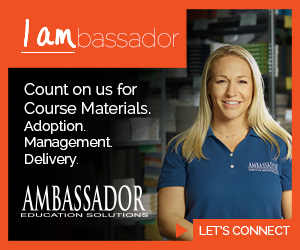
<style>
.page{position:relative;width:300px;height:250px;background:#f05123}
.page>*{position:absolute;margin:0}
.t1{font:26.2px "Raleway-Thin";letter-spacing:-0.03em}
.t2{font:16px "Raleway-Regular";color:#ffffff}
.t3{font:14px "Raleway-Regular";color:#ffffff}
.t4{font:12px "Raleway-Regular";color:#ffffff;text-transform:uppercase}
</style>
<div class="page">
<p class="t1" style="left:78px;top:27px;width:101px;height:21px">bassador</p>
<p class="t2" style="left:24px;top:83px;width:127px;height:84px">Count on us for<br>Course Materials.<br><span class="t3">Adoption.<br>Management.<br>Delivery.</span></p>
<p class="t4" style="left:199px;top:226px;width:91px;height:9px">Let’s Connect</p>
</div>
